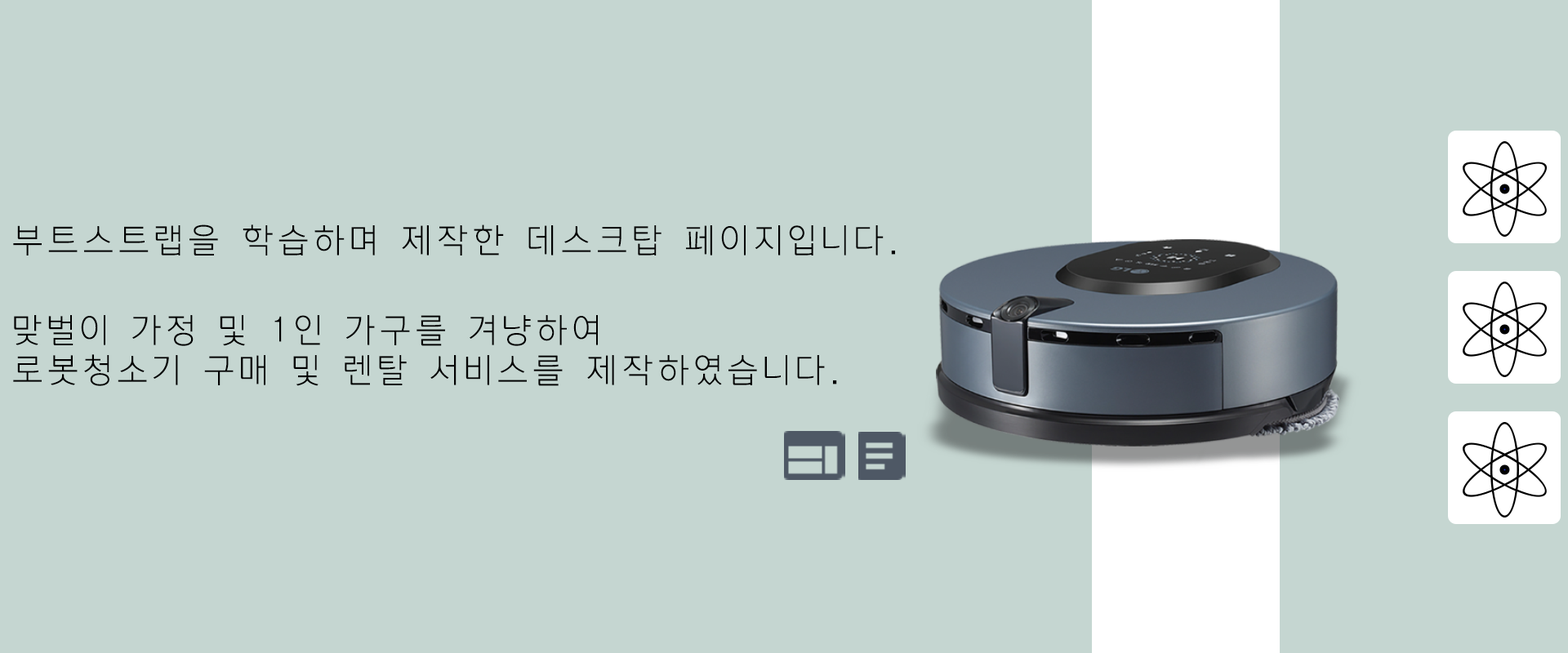
<style>
.page{position:relative;width:1568px;height:653px;background:#c5d6d1}
.page>*{position:absolute;margin:0}
.t1{font:32.7px "KoreanDREAM1-R";letter-spacing:0.16em;color:#000000}
.t2{font:32.7px/40px "KoreanDREAM1-R";letter-spacing:0.16em;color:#000000}
</style>
<div class="page">
<p class="t1" style="left:13px;top:225px;width:882px;height:31px">부트스트랩을 학습하며 제작한 데스크탑 페이지입니다.</p>
<p class="t2" style="left:13px;top:315px;width:824px;height:71px">맞벌이 가정 및 1인 가구를 겨냥하여<br>로봇청소기 구매 및 렌탈 서비스를 제작하였습니다.</p>
</div>
